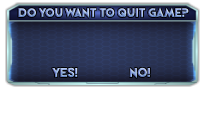
<style>
.page{position:relative;width:205px;height:130px;background:#ffffff}
.page>*{position:absolute;margin:0}
.t1{font:12.5px "PerfectlyTogether"}
.t2{font:13px "PerfectlyTogether"}
</style>
<div class="page">
<p class="t1" style="left:18px;top:7px;width:171px;height:12px">Do you want to Quit Game?</p>
<p class="t2" style="left:52px;top:67px;width:26px;height:11px">Yes!</p>
<p class="t2" style="left:129px;top:67px;width:21px;height:12px">No!</p>
</div>
